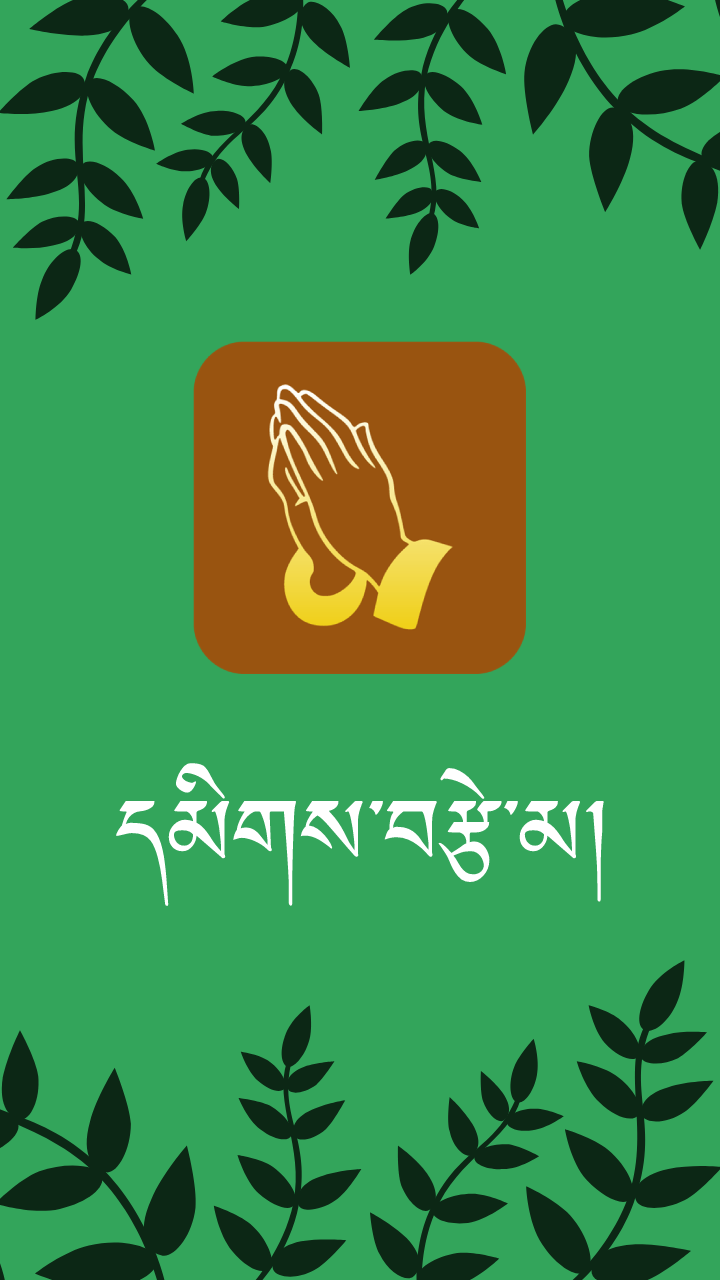
<style>
.page{position:relative;width:720px;height:1280px;background:#33a55b}
.page>*{position:absolute;margin:0}
.t1{font:119.3px "Jomolhari-Regular";color:#ffffff}
</style>
<div class="page">
<p class="t1" style="left:116px;top:763px;width:488px;height:143px">དམིགས་བརྩེ་མ།</p>
</div>
